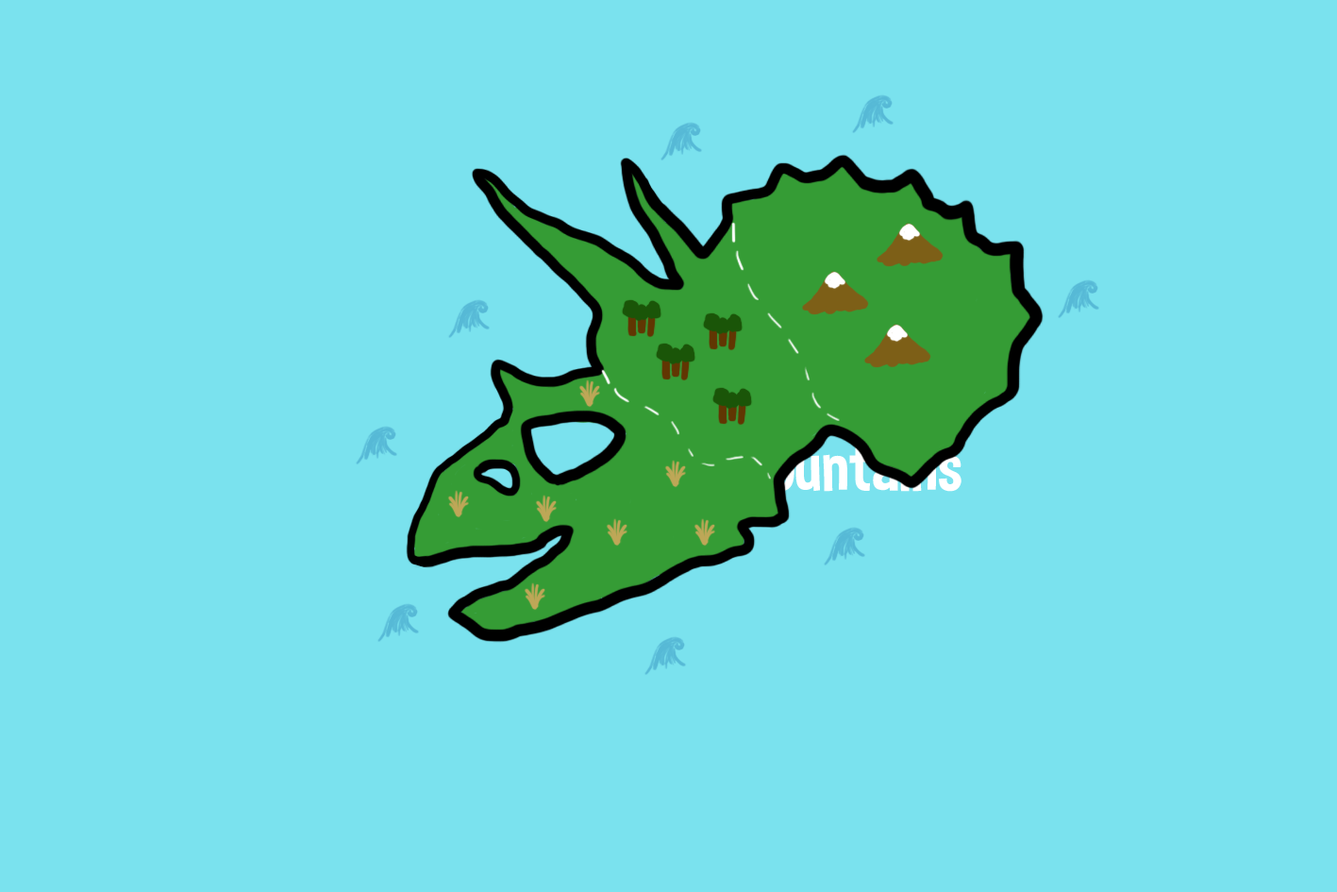
<style>
.page{position:relative;width:1337px;height:892px;background:#7ae2ee}
.page>*{position:absolute;margin:0}
.t1{font:70.5px "DimboRegular"}
</style>
<div class="page">
<p class="t1" style="left:729px;top:443px;width:233px;height:49px">mountains</p>
</div>
